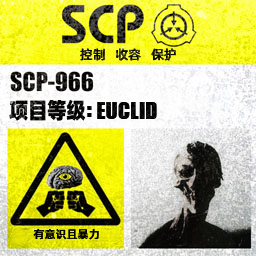
<style>
.page{position:relative;width:256px;height:256px}
.page>*{position:absolute;margin:0}
.t1{font:13px "AlibabaPuHuiTiM"}
.t2{font:26px "URWImpactW01-Bold";letter-spacing:0.02em;color:#000000}
.t3{font:22px "AlibabaPuHuiTiH";letter-spacing:-0.02em;color:#000000;scale:0.9 1}
.t4{font:22px "AlibabaPuHuiTiH";color:#000000;scale:0.9 1}
.t5{font:31px "URWImpactW01-Bold";color:#000000}
.t6{font:11px "AlibabaPuHuiTiM";letter-spacing:0.02em;color:#000000}
</style>
<div class="page">
<p class="t1" style="left:80px;top:48px;width:96px;height:13px">控制   收容   保护</p>
<p class="t2" style="left:9px;top:99px;width:148px;height:22px"><span class="t3">项目等</span><span class="t4">级</span><span class="t5">: </span>EUCLID</p>
<p class="t6" style="left:33px;top:229px;width:66px;height:11px">有意识且暴力</p>
</div>
